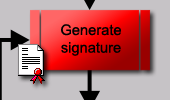
<style>
.page{position:relative;width:170px;height:100px;background:#c6c3c6}
.page>*{position:absolute;margin:0}
.t1{font:14.7px "ArialMT";color:#000000}
</style>
<div class="page">
<p class="t1" style="left:61px;top:24px;width:60px;height:32px;text-align:center">Generate<br>signature</p>
</div>
